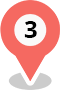
<style>
.page{position:relative;width:60px;height:90px;background:#f56961}
.page>*{position:absolute;margin:0}
.t1{font:24px "OpenSans-Bold";letter-spacing:-0.05em;color:#000000}
</style>
<div class="page">
<p class="t1" style="left:24px;top:21px;width:13px;height:17px">3</p>
</div>
